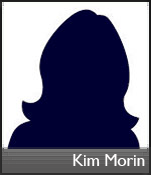
<style>
.page{position:relative;width:151px;height:175px;background:#000032}
.page>*{position:absolute;margin:0}
.t1{font:16.7px "GillSansMT";color:#fffefe}
</style>
<div class="page">
<p class="t1" style="left:73px;top:154px;width:72px;height:12px">Kim Morin</p>
</div>
